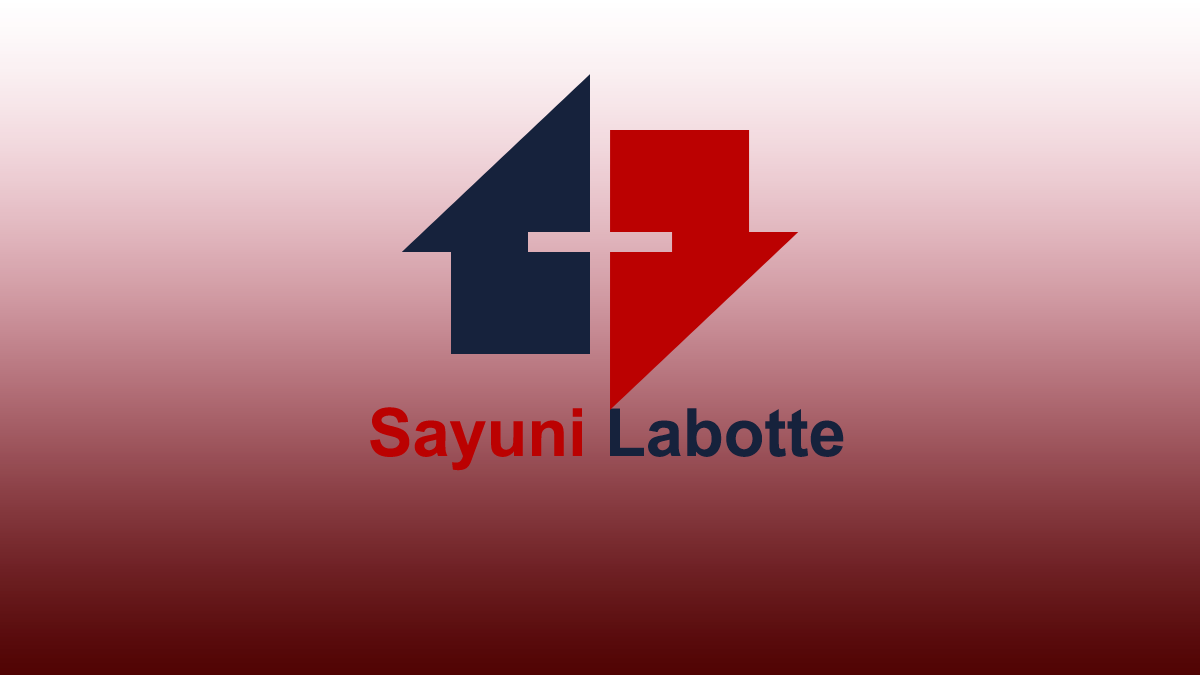
<style>
.page{position:relative;width:1200px;height:675px}
.page>*{position:absolute;margin:0}
.t1{font:66.7px "Arial-BoldMT";color:#16223c}
.t2{font:66.7px "Arial-BoldMT";color:#bb0101}
</style>
<div class="page">
<p class="t1" style="left:370px;top:407px;width:474px;height:64px"><span class="t2">Sayuni </span>Labotte</p>
</div>
